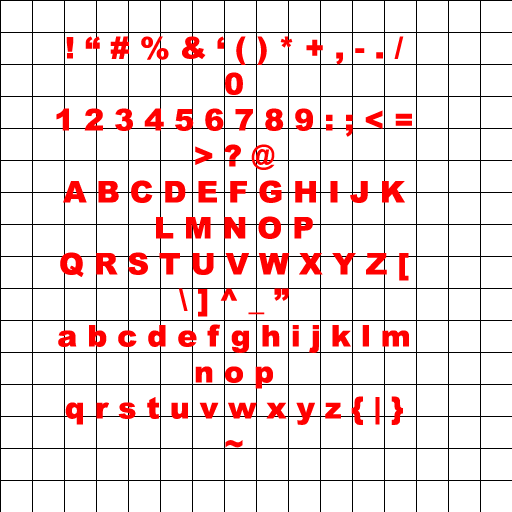
<style>
.page{position:relative;width:512px;height:512px;background:#ffffff}
.page>*{position:absolute;margin:0}
.t1{font:30px "Arial-Black";color:#ff0000}
</style>
<div class="page">
<p class="t1" style="left:56px;top:36px;width:356px;height:412px;text-align:center">! “ # % &amp; ‘ ( ) * + , - . / 0<br>1 2 3 4 5 6 7 8 9 : ; &lt; = &gt; ? @<br>A B C D E F G H I J K L M N O P<br>Q R S T U V W X Y Z [ \ ] ^ _ ”<br>a b c d e f g h i j k l m n o p <br>q r s t u v w x y z { | } ~</p>
</div>
